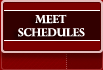
<style>
.page{position:relative;width:103px;height:70px;background:#7c0000}
.page>*{position:absolute;margin:0}
.t1{font:11px "PerpetuaTitlingMT-Bold";color:#ffffff}
.t2{font:11px "Tahoma";color:#ffffff}
</style>
<div class="page">
<p class="t1" style="left:18px;top:14px;width:67px;height:23px"><span class="t2">     </span>MEET <br>schedules</p>
</div>
